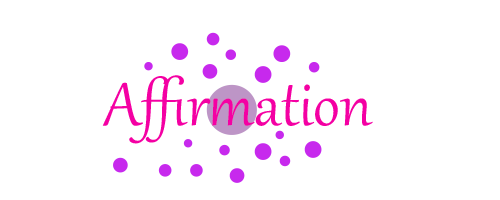
<style>
.page{position:relative;width:500px;height:200px;background:#ffffff}
.page>*{position:absolute;margin:0}
.t1{font:75px "Gabriola";color:#f400a3}
</style>
<div class="page">
<p class="t1" style="left:102px;top:75px;width:271px;height:69px">Affirmation</p>
</div>
